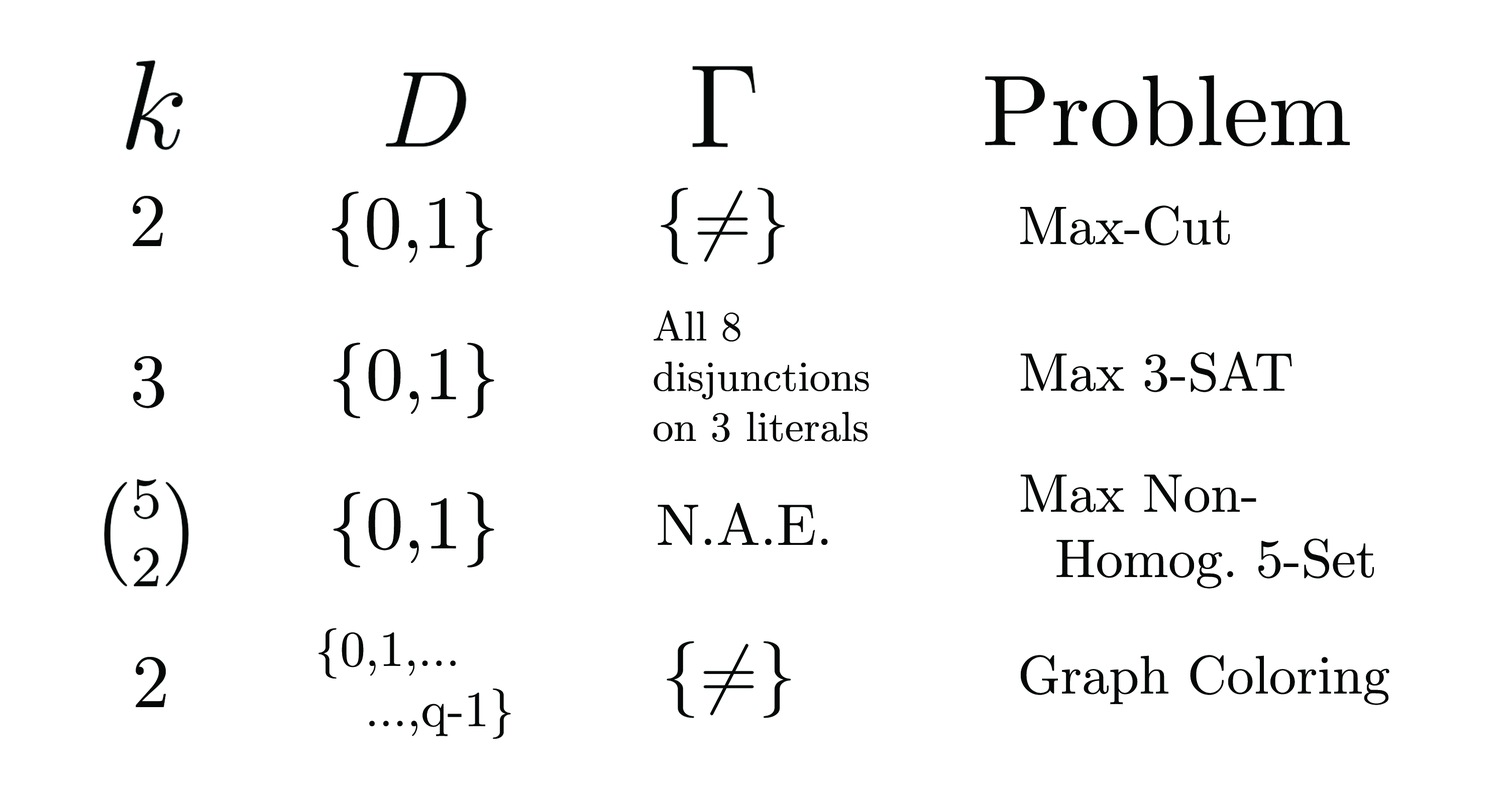
<style>
.page{position:relative;width:1507px;height:791px;background:#ffffff}
.page>*{position:absolute;margin:0}
.t1{font:100.5px "CMUSerif-Roman";color:#060808}
.t2{font:75.4px "CMUSerif-Roman";color:#060808}
.t3{font:54.4px "CMUSerif-Roman";color:#060808}
.t4{font:41.9px "CMUSerif-Roman";color:#060808}
.t5{font:58.6px "CMUSerif-Roman";color:#060808}
.t6{font:50.2px "CMUSerif-Roman";color:#060808}
</style>
<div class="page">
<p class="t1" style="left:985px;top:75px;width:365px;height:72px">Problem</p>
<p class="t2" style="left:133px;top:196px;width:30px;height:50px">2</p>
<p class="t2" style="left:332px;top:191px;width:161px;height:76px">{0,1}</p>
<p class="t3" style="left:1020px;top:205px;width:210px;height:41px">Max-Cut</p>
<p class="t4" style="left:654px;top:310px;width:215px;height:132px">All 8<br>disjunctions<br>on 3 literals</p>
<p class="t2" style="left:333px;top:343px;width:161px;height:75px">{0,1}</p>
<p class="t3" style="left:1021px;top:352px;width:271px;height:40px">Max 3-SAT</p>
<p class="t2" style="left:133px;top:356px;width:31px;height:52px">3</p>
<p class="t3" style="left:1021px;top:475px;width:353px;height:114px">Max Non-<br>  Homog. 5-Set</p>
<p class="t2" style="left:333px;top:492px;width:161px;height:76px">{0,1}</p>
<p class="t5" style="left:658px;top:503px;width:170px;height:42px">N.A.E.</p>
<p class="t6" style="left:318px;top:628px;width:193px;height:111px">{0,1,...<br>   ...,q-1}</p>
<p class="t2" style="left:136px;top:657px;width:30px;height:50px">2</p>
<p class="t3" style="left:1021px;top:655px;width:369px;height:50px">Graph Coloring</p>
</div>
